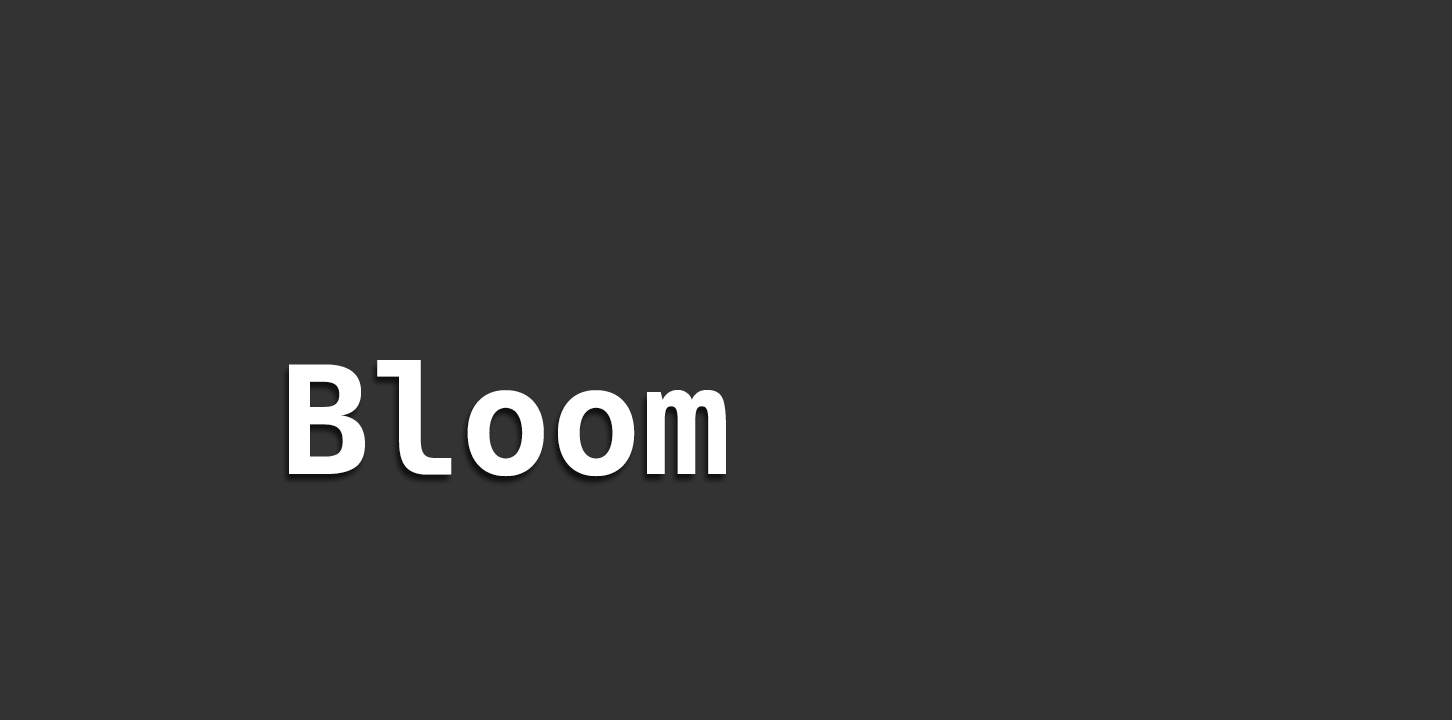
<style>
.page{position:relative;width:1452px;height:720px;background:#333333}
.page>*{position:absolute;margin:0}
.t1{font:150px "Hack-Bold";color:#ffffff}
</style>
<div class="page">
<p class="t1" style="left:289px;top:360px;width:437px;height:117px">Bloom</p>
</div>
